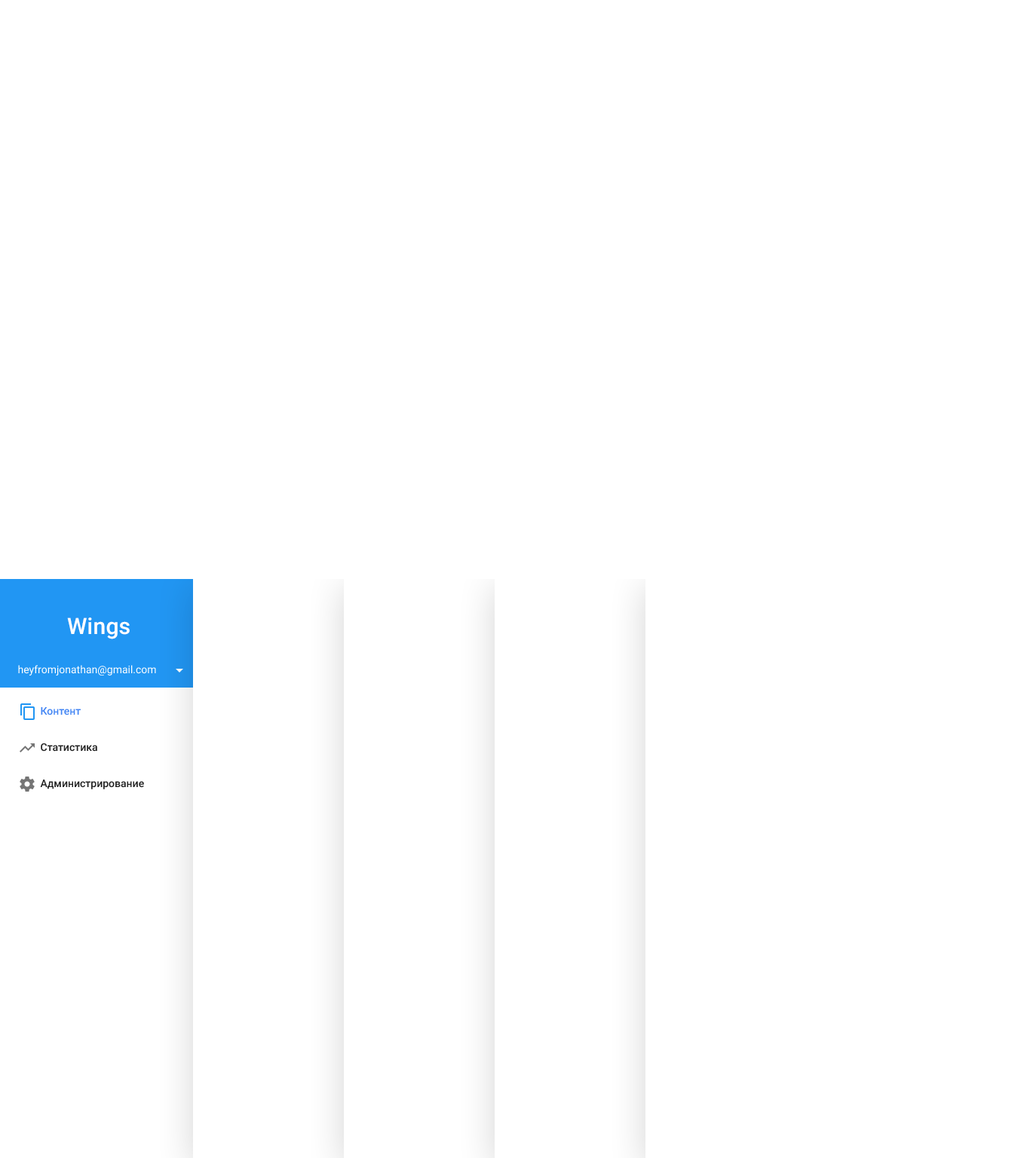
<style>
.page{position:relative;width:1030px;height:1158px;background:#ffffff}
.page>*{position:absolute;margin:0}
.t1{font:22.6px "Roboto-Medium";letter-spacing:0.01em;color:#feffff}
.t2{font:10.6px "Roboto-Regular";color:#ffffff}
.t3{font:10.6px "Roboto-Medium";color:#4285f4}
.t4{font:10.6px "Roboto-Medium";color:#212121}
</style>
<div class="page">
<p class="t1" style="left:67px;top:617px;width:63px;height:22px">Wings</p>
<p class="t2" style="left:18px;top:665px;width:138px;height:10px">heyfromjonathan@gmail.com</p>
<p class="t3" style="left:41px;top:707px;width:40px;height:8px">Контент</p>
<p class="t4" style="left:41px;top:743px;width:56px;height:9px">Статистика</p>
<p class="t4" style="left:40px;top:780px;width:104px;height:9px">Администрирование</p>
</div>
